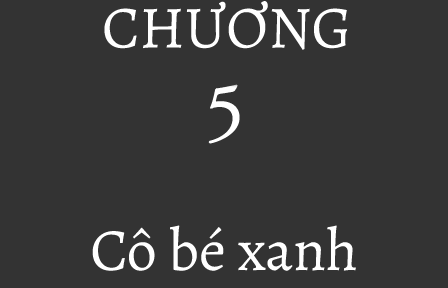
<style>
.page{position:relative;width:448px;height:288px;background:#333333}
.page>*{position:absolute;margin:0}
.t1{font:60px "Alegreya-Regular";color:#ffffff}
</style>
<div class="page">
<p class="t1" style="left:104px;top:1px;width:243px;height:49px">CHƯƠNG</p>
<p class="t1" style="left:92px;top:225px;width:264px;height:46px">Cô bé xanh</p>
</div>
